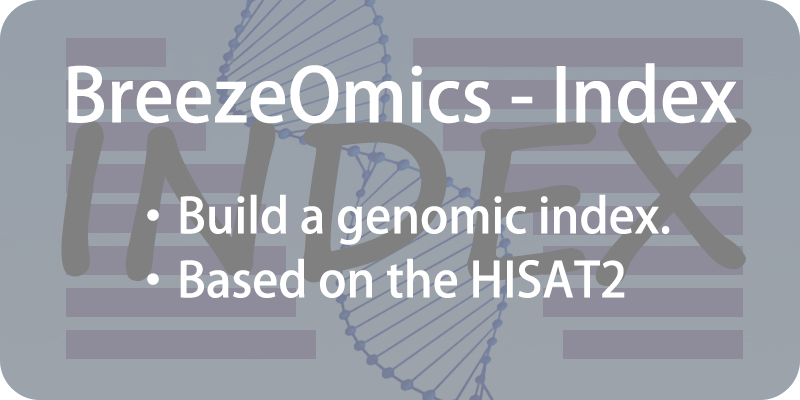
<style>
.page{position:relative;width:800px;height:400px;background:#8e8b9a}
.page>*{position:absolute;margin:0}
.t1{font:48px/64px "AdobeHeitiStd-Regular";color:#ffffff}
.t2{font:80px/64px "AdobeHeitiStd-Regular";color:#ffffff}
.t3{font:73.3px/133.3px "AdobeHeitiStd-Regular";color:#ffffff}
.t4{font:213.3px "SegoePrint-Bold";color:#808080}
</style>
<div class="page">
<p class="t1" style="left:68px;top:63px;width:669px;height:235px;text-align:center"><span class="t2"><br></span><span class="t3">BreezeOmics - Index<br></span>            ·Build a genomic index. <br>            ·Based on the HISAT2</p>
<p class="t4" style="left:61px;top:117px;width:691px;height:169px">INDEX</p>
</div>
